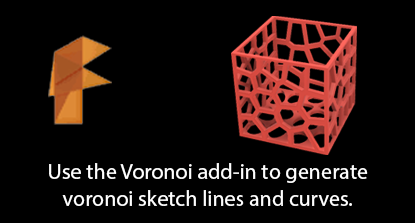
<style>
.page{position:relative;width:415px;height:223px;background:#000000}
.page>*{position:absolute;margin:0}
.t1{font:22px "MyriadPro-Regular";color:#ffffff}
</style>
<div class="page">
<p class="t1" style="left:49px;top:163px;width:319px;height:43px;text-align:center">Use the Voronoi add-in to generate<br>voronoi sketch lines and curves.</p>
</div>
